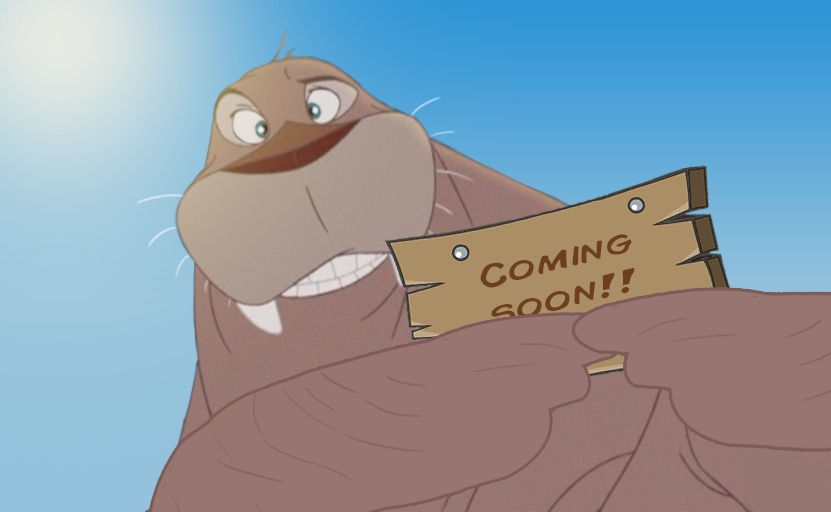
<style>
.page{position:relative;width:831px;height:512px}
.page>*{position:absolute;margin:0}
.t1{font:31.8px "ComicBook";color:#6e3f1e;scale:1.37 1}
</style>
<div class="page">
<p class="t1" style="left:480px;top:234px;width:155px;height:90px;rotate:-14deg">Coming soon!!</p>
</div>
